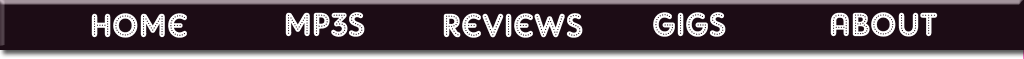
<style>
.page{position:relative;width:1024px;height:59px;background:#1c0c15}
.page>*{position:absolute;margin:0}
.t1{font:33.3px "AdamGorry-Lights";color:#ffffff}
</style>
<div class="page">
<p class="t1" style="left:91px;top:13px;width:96px;height:25px">Home</p>
<p class="t1" style="left:285px;top:12px;width:80px;height:25px">Mp3s</p>
<p class="t1" style="left:443px;top:13px;width:140px;height:25px">Reviews</p>
<p class="t1" style="left:653px;top:12px;width:73px;height:25px">gigs</p>
<p class="t1" style="left:830px;top:12px;width:108px;height:25px">About</p>
</div>
